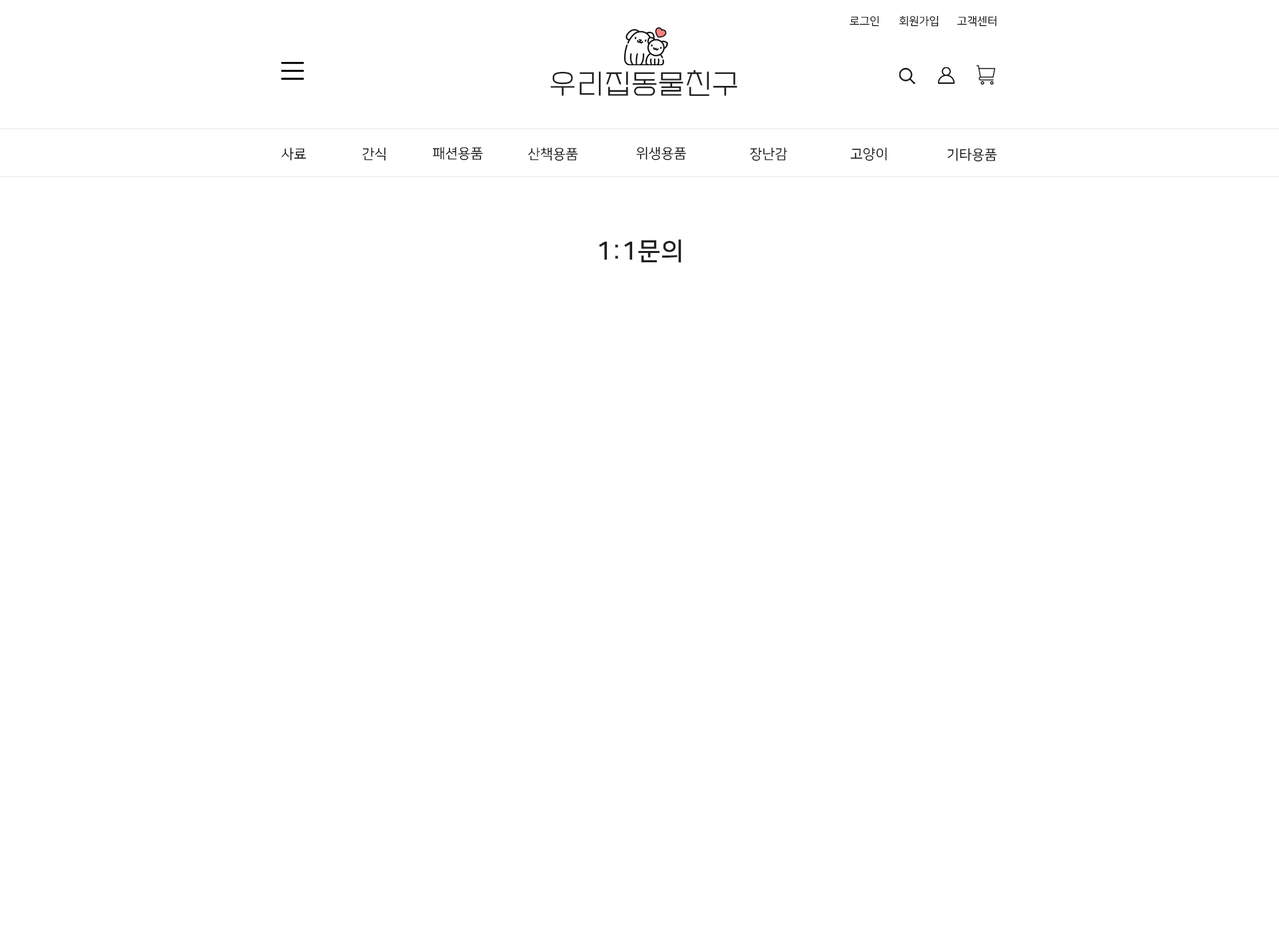
<style>
.page{position:relative;width:1279px;height:932px;background:#ffffff}
.page>*{position:absolute;margin:0}
.t1{font:11.1px "NanumSquareR";color:#000000}
.t2{font:27.8px "EF_watermelonSalad";letter-spacing:0.025em;color:#202020}
.t3{font:13.9px "NanumSquareR";color:#000000}
.t4{font:25px "NanumSquareB";letter-spacing:0.025em;color:#202020}
</style>
<div class="page">
<p class="t1" style="left:849px;top:15px;width:30px;height:12px">로그인</p>
<p class="t1" style="left:899px;top:15px;width:39px;height:12px">회원가입</p>
<p class="t1" style="left:957px;top:15px;width:39px;height:12px">고객센터</p>
<p class="t2" style="left:550px;top:70px;width:187px;height:26px">우리집동물친구</p>
<p class="t3" style="left:281px;top:147px;width:25px;height:14px">사료</p>
<p class="t3" style="left:362px;top:147px;width:24px;height:14px">간식</p>
<p class="t3" style="left:432px;top:147px;width:51px;height:14px">패션용품</p>
<p class="t3" style="left:528px;top:147px;width:50px;height:14px">산책용품</p>
<p class="t3" style="left:636px;top:147px;width:50px;height:14px">위생용품</p>
<p class="t3" style="left:750px;top:147px;width:37px;height:14px">장난감</p>
<p class="t3" style="left:850px;top:147px;width:37px;height:14px">고양이</p>
<p class="t3" style="left:947px;top:148px;width:50px;height:14px">기타용품</p>
<p class="t4" style="left:599px;top:239px;width:82px;height:24px">1:1문의</p>
</div>
